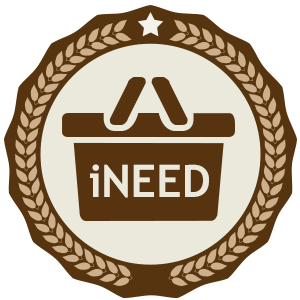
<style>
.page{position:relative;width:300px;height:300px;background:#ffffff}
.page>*{position:absolute;margin:0}
.t1{font:45px "TrebuchetMS-Bold";letter-spacing:-0.01em;color:#ebe9dc}
</style>
<div class="page">
<p class="t1" style="left:90px;top:164px;width:119px;height:34px">iNEED</p>
</div>
